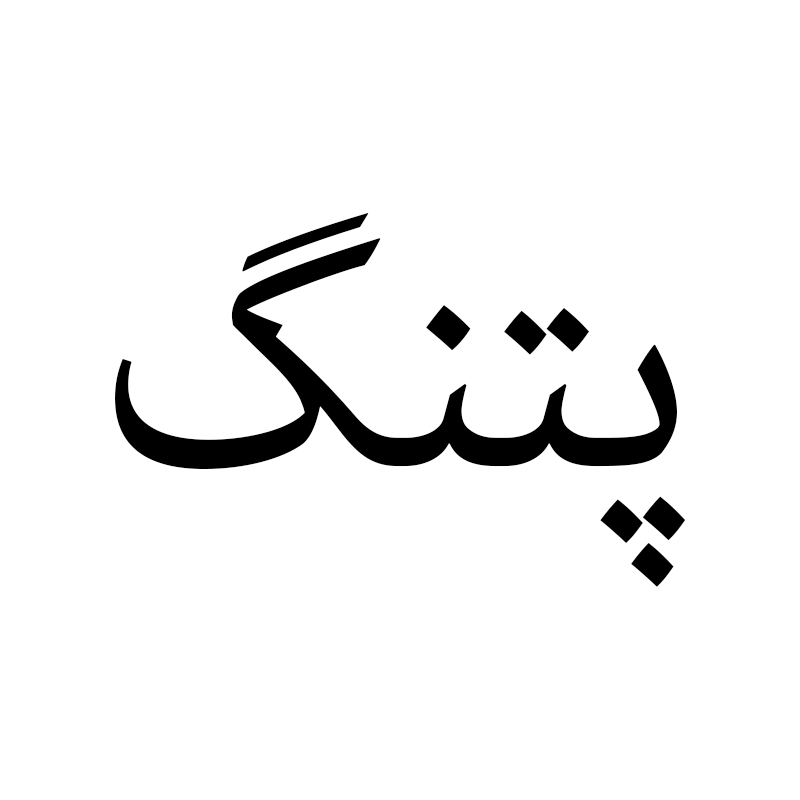
<style>
.page{position:relative;width:800px;height:800px;background:#ffffff}
.page>*{position:absolute;margin:0}
.t1{font:450px "AdobeArabic-Regular";color:#000000}
</style>
<div class="page">
<p class="t1" style="left:115px;top:212px;width:571px;height:375px">پتنگ</p>
</div>
